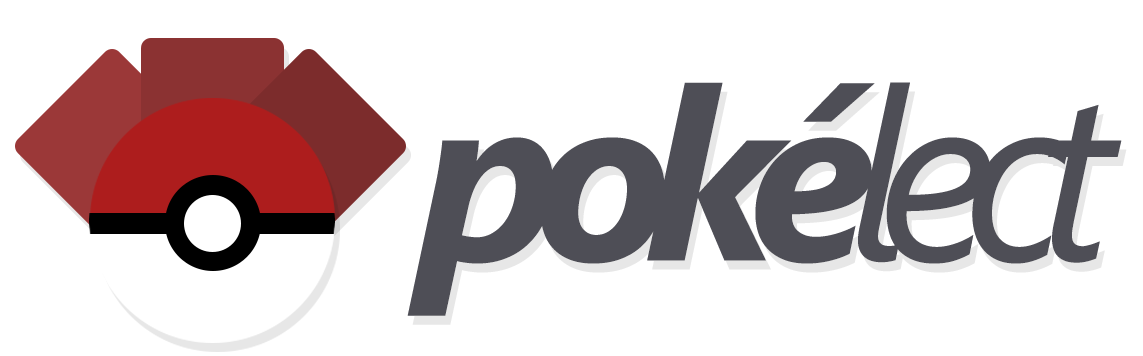
<style>
.page{position:relative;width:1143px;height:356px;background:#ffffff}
.page>*{position:absolute;margin:0}
.t1{font:240px "SegoeUI-BoldItalic";letter-spacing:-0.11em;color:#4e4e56}
.t2{font:240px "SegoeUI-Italic";letter-spacing:-0.13em;color:#4e4e56}
</style>
<div class="page">
<p class="t1" style="left:407px;top:82px;width:715px;height:234px">poké<span class="t2">lect</span></p>
</div>
